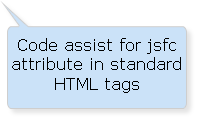
<style>
.page{position:relative;width:197px;height:118px;background:#cbe2f8}
.page>*{position:absolute;margin:0}
.t1{font:16px "Verdana";color:#000000}
</style>
<div class="page">
<p class="t1" style="left:12px;top:38px;width:169px;height:55px;text-align:center">Code assist for jsfc attribute in standard HTML tags</p>
</div>
